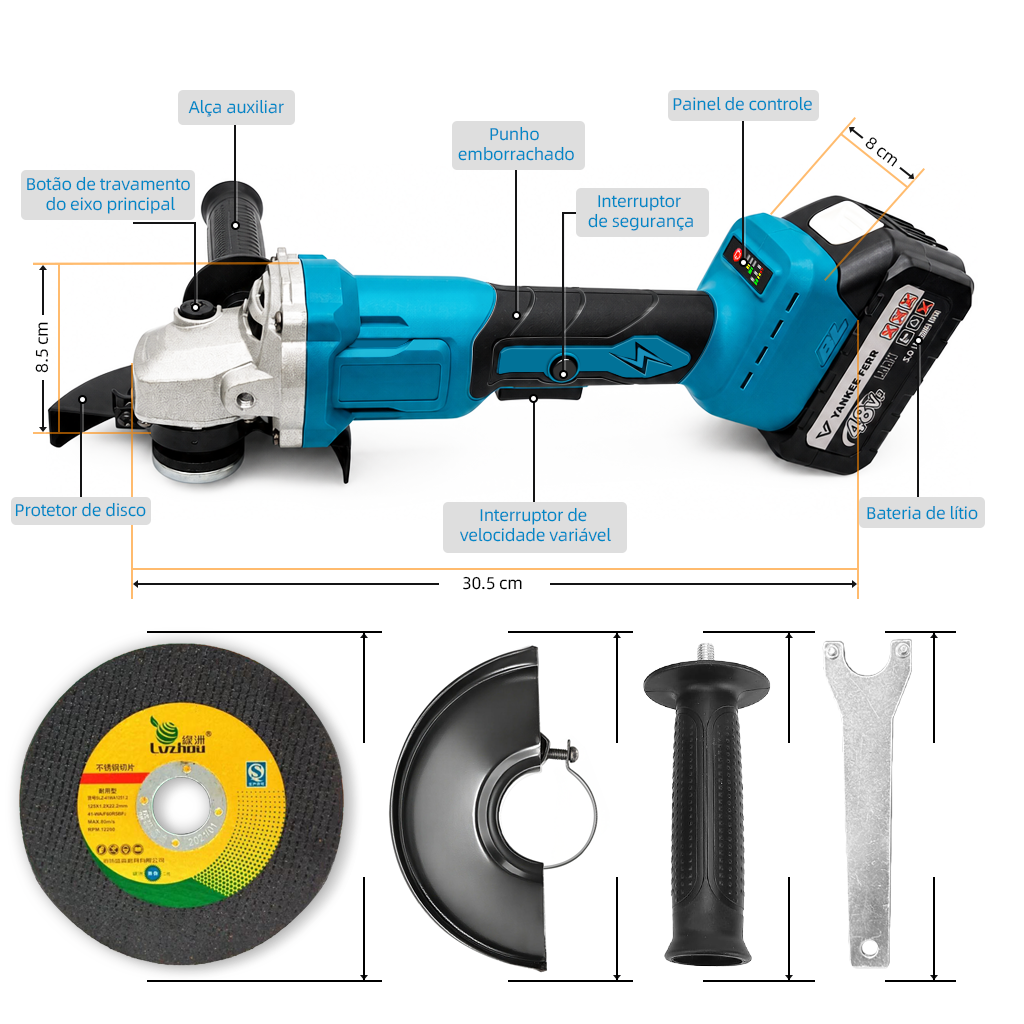
<style>
.page{position:relative;width:1024px;height:1024px;background:#ffffff}
.page>*{position:absolute;margin:0}
.t1{font:17px "AlibabaPuHuiTi_2_55_Regular";letter-spacing:-0.02em;color:#0087c6}
.t2{font:17px/20px "AlibabaPuHuiTi_2_55_Regular";letter-spacing:-0.02em;color:#0087c6}
.t3{font:17px "AlibabaPuHuiTi_2_55_Regular";letter-spacing:-0.02em;color:#000000}
</style>
<div class="page">
<p class="t1" style="left:188px;top:99px;width:96px;height:18px">Alça auxiliar</p>
<p class="t1" style="left:673px;top:96px;width:139px;height:15px">Painel de controle</p>
<p class="t2" style="left:458px;top:126px;width:116px;height:35px;text-align:center">Punho <br>emborrachado</p>
<p class="t3" style="left:865px;top:137px;width:33px;height:30px;rotate:37deg">8 cm</p>
<p class="t2" style="left:27px;top:176px;width:163px;height:38px;text-align:center">Botão de travamento <br>do eixo principal</p>
<p class="t2" style="left:588px;top:195px;width:105px;height:36px;text-align:center">Interruptor <br>de segurança</p>
<p class="t3" style="left:35px;top:322px;width:14px;height:51px;rotate:-90deg">8.5 cm</p>
<p class="t1" style="left:15px;top:502px;width:131px;height:15px">Protetor de disco</p>
<p class="t2" style="left:460px;top:507px;width:151px;height:35px;text-align:center">Interruptor de <br>velocidade variável</p>
<p class="t1" style="left:867px;top:505px;width:111px;height:15px">Bateria de lítio</p>
<p class="t3" style="left:463px;top:576px;width:59px;height:14px">30.5 cm</p>
</div>
